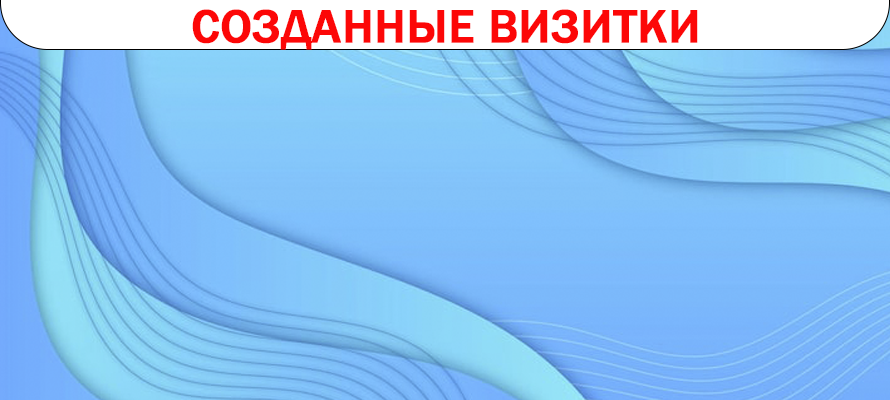
<style>
.page{position:relative;width:890px;height:400px}
.page>*{position:absolute;margin:0}
.t1{font:48px "FranklinGothic-Medium";color:#fc0707;text-transform:uppercase;font-weight:bold}
</style>
<div class="page">
<p class="t1" style="left:192px;top:9px;width:506px;height:41px">Созданные визитки</p>
</div>
